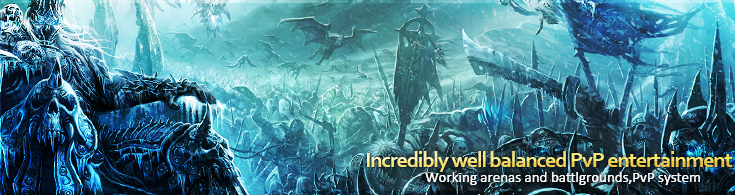
<style>
.page{position:relative;width:735px;height:195px}
.page>*{position:absolute;margin:0}
.t1{font:22px "Corbel-Bold";letter-spacing:-0.05em}
.t2{font:15px "Calibri";color:#ffffff}
</style>
<div class="page">
<p class="t1" style="left:367px;top:151px;width:366px;height:21px">Incredibly well balanced PvP entertainment</p>
<p class="t2" style="left:425px;top:172px;width:275px;height:13px">Working arenas and battlgrounds,PvP system</p>
<p class="t2" style="left:425px;top:172px;width:275px;height:13px">Working arenas and battlgrounds,PvP system</p>
</div>
